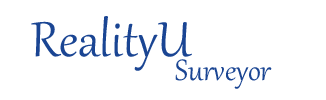
<style>
.page{position:relative;width:326px;height:100px;background:#ffffff}
.page>*{position:absolute;margin:0}
.t1{font:60.1px "Gabriola";color:#1a4593}
.t2{font:36px "Gabriola";color:#1a4593}
</style>
<div class="page">
<p class="t1" style="left:31px;top:16px;width:161px;height:55px">RealityU</p>
<p class="t2" style="left:175px;top:59px;width:97px;height:30px">Surveyor</p>
</div>
